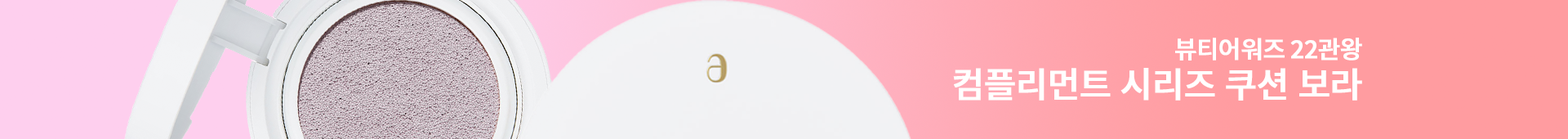
<style>
.page{position:relative;width:1568px;height:139px}
.page>*{position:absolute;margin:0}
.t1{font:24.5px "NotoSansKR-Medium";letter-spacing:-0.04em;color:#ffffff;font-weight:bold}
.t2{font:35.1px "NotoSansKR-Medium";letter-spacing:-0.04em;color:#ffffff;font-weight:bold}
</style>
<div class="page">
<p class="t1" style="left:1175px;top:38px;width:187px;height:22px">뷰티어워즈 22관왕</p>
<p class="t2" style="left:953px;top:68px;width:409px;height:32px">컴플리먼트 시리즈 쿠션 보라</p>
</div>
